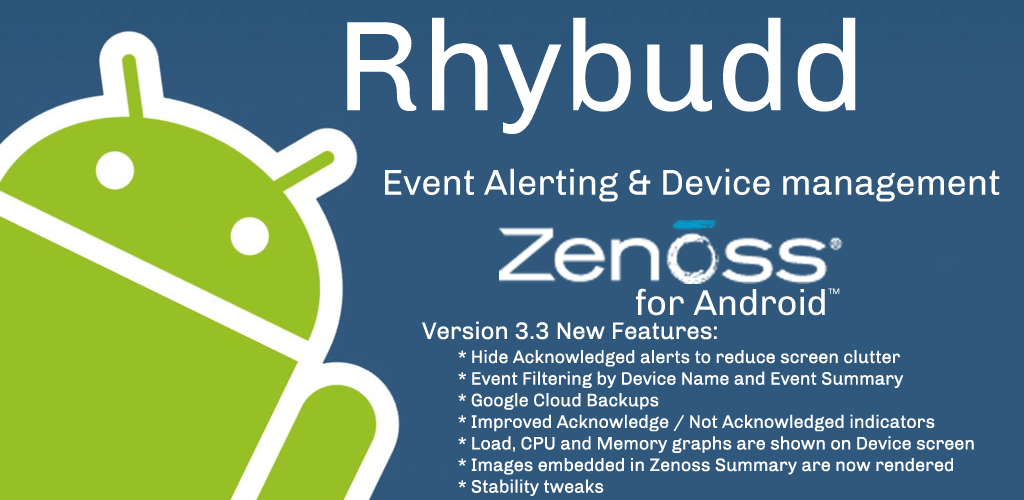
<style>
.page{position:relative;width:1024px;height:500px;background:#30587c}
.page>*{position:absolute;margin:0}
.t1{font:128px "Chivo-Regular";color:#ffffff}
.t2{font:36px "Chivo-Regular";color:#ffffff}
.t3{font:8px "Chivo-Regular";color:#ffffff}
.t4{font:18px "Chivo-Regular";color:#ffffff}
.t5{font:24px "Chivo-Regular";color:#ffffff}
</style>
<div class="page">
<p class="t1" style="left:347px;top:17px;width:509px;height:117px">Rhybudd</p>
<p class="t2" style="left:385px;top:168px;width:615px;height:34px">Event Alerting &amp; Device management</p>
<p class="t2" style="left:636px;top:288px;width:189px;height:28px">for Android</p>
<p class="t3" style="left:828px;top:288px;width:12px;height:6px">TM</p>
<p class="t4" style="left:422px;top:321px;width:552px;height:175px"><span class="t5">Version 3.3 New Features:<br> </span>* Hide Acknowledged alerts to reduce screen clutter<br> * Event Filtering by Device Name and Event Summary<br> * Google Cloud Backups<br> * Improved Acknowledge / Not Acknowledged indicators<br> * Load, CPU and Memory graphs are shown on Device screen<br> * Images embedded in Zenoss Summary are now rendered<br> * Stability tweaks</p>
</div>
